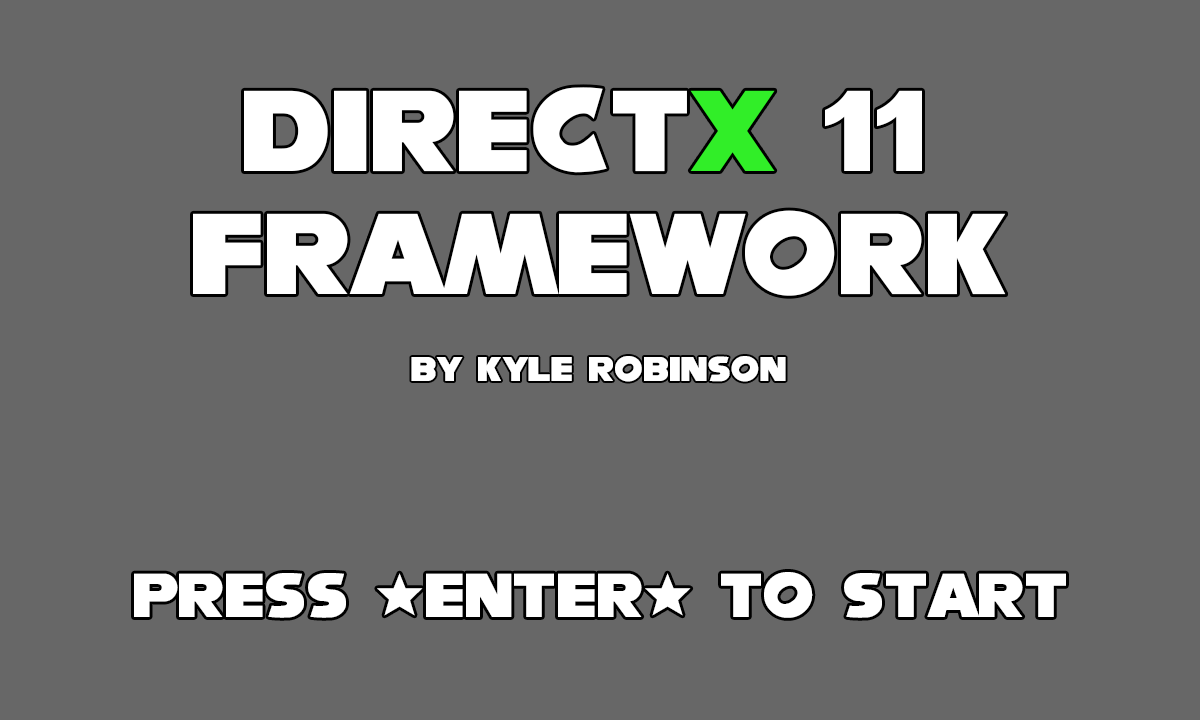
<style>
.page{position:relative;width:1200px;height:720px;background:#676767}
.page>*{position:absolute;margin:0}
.t1{font:102.6px "NiseSegaSonic";color:#ffffff}
.t2{font:102.6px "NiseSegaSonic";color:#31ee28}
.t3{font:30.8px "NiseSegaSonic";color:#ffffff}
.t4{font:55.4px "NiseSegaSonic";color:#ffffff}
</style>
<div class="page">
<p class="t1" style="left:193px;top:87px;width:813px;height:209px">Direct<span class="t2">X </span>11<br>Framework</p>
<p class="t3" style="left:411px;top:356px;width:375px;height:26px">By Kyle Robinson</p>
<p class="t4" style="left:134px;top:572px;width:932px;height:46px">Press *Enter* to Start</p>
</div>
